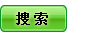
<style>
.page{position:relative;width:110px;height:37px;background:#ffffff}
.page>*{position:absolute;margin:0}
.t1{font:14px "SimSun";letter-spacing:0.2em;color:#000000;font-weight:bold}
</style>
<div class="page">
<p class="t1" style="left:16px;top:12px;width:32px;height:13px">搜索</p>
</div>
